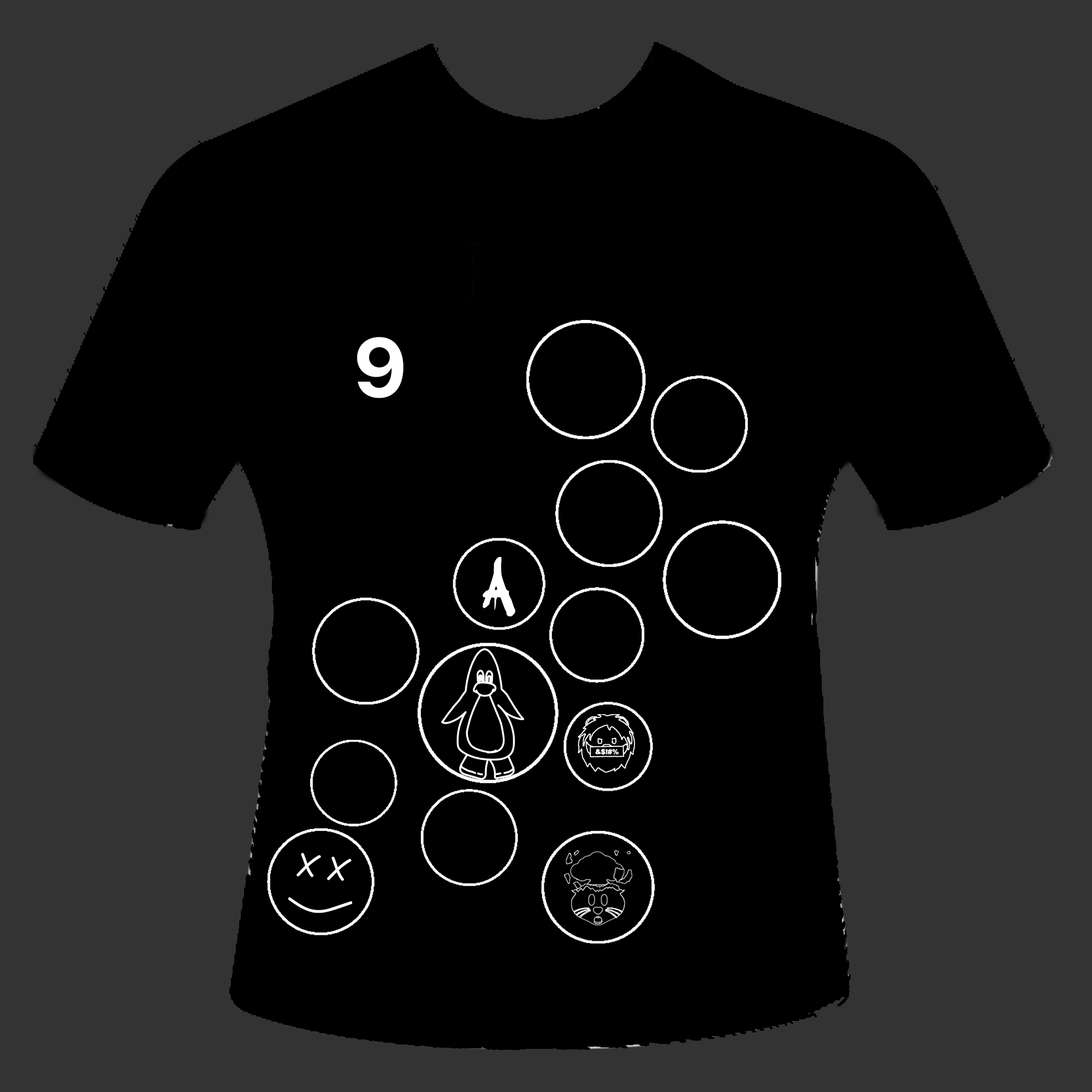
<style>
.page{position:relative;width:1092px;height:1092px;background:#000000}
.page>*{position:absolute;margin:0}
.t1{font:81.9px "Galvji-Bold";color:#ffffff}
.t2{font:81.9px "adrippingmarker";color:#ffffff}
</style>
<div class="page">
<p class="t1" style="left:357px;top:337px;width:46px;height:61px">9</p>
<p class="t2" style="left:483px;top:557px;width:32px;height:59px">A</p>
</div>
